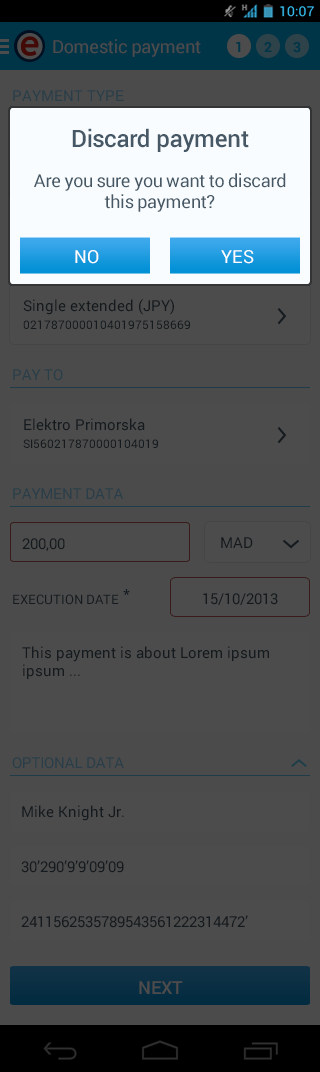
<style>
.page{position:relative;width:320px;height:1072px;background:#4c4c4c}
.page>*{position:absolute;margin:0}
.t1{font:18px "Roboto-Regular";letter-spacing:-0.015em;color:#4c4c4c}
.t2{font:15px "Roboto-Regular";color:#293e48}
.t3{font:18px/21.6px "Roboto-Regular";letter-spacing:-0.015em;color:#465866}
.t4{font:24px/28.8px "Roboto-Medium";letter-spacing:-0.015em;color:#465866}
.t5{font:18px "Roboto-Regular";color:#ffffff}
.t6{font:12px/18px "Roboto-Regular";color:#151a1e}
.t7{font:15px/18px "Roboto-Regular";color:#151a1e}
.t8{font:15px "Roboto-Regular";letter-spacing:-0.015em;color:#293e48}
.t9{font:12px/14.4px "Roboto-Regular";color:#151a1e}
.t10{font:15px "Roboto-Regular";color:#151a1e}
.t11{font:13px "OpenSans-Semibold";letter-spacing:-0.02em;color:#151a1e}
.t12{font:13px "Roboto-Regular";color:#151a1e}
.t13{font:18px "Roboto-Medium";color:#4c4c4c}
</style>
<div class="page">
<p class="t1" style="left:53px;top:39px;width:148px;height:18px">Domestic payment</p>
<p class="t2" style="left:13px;top:90px;width:111px;height:11px">PAYMENT TYPE</p>
<p class="t3" style="left:34px;top:128px;width:252px;height:84px;text-align:center"><span class="t4">Discard payment <br><br></span>Are you sure you want to discard <br>this payment?</p>
<p class="t5" style="left:75px;top:250px;width:24px;height:14px">NO</p>
<p class="t5" style="left:221px;top:250px;width:33px;height:14px">YES</p>
<p class="t6" style="left:23px;top:299px;width:167px;height:30px"><span class="t7">Single extended (JPY)<br></span>021787000010401975158669</p>
<p class="t8" style="left:13px;top:369px;width:50px;height:12px">PAY TO</p>
<p class="t7" style="left:23px;top:418px;width:135px;height:30px">Elektro Primorska<br><span class="t9">SI56</span><span class="t6">0217870000104019</span></p>
<p class="t8" style="left:13px;top:488px;width:110px;height:11px">PAYMENT DATA</p>
<p class="t10" style="left:22px;top:538px;width:43px;height:13px">200,00</p>
<p class="t10" style="left:221px;top:537px;width:32px;height:11px">MAD</p>
<p class="t11" style="left:123px;top:589px;width:7px;height:6px">*</p>
<p class="t10" style="left:203px;top:593px;width:75px;height:12px">15/10/2013</p>
<p class="t12" style="left:13px;top:594px;width:106px;height:11px">EXECUTION DATE</p>
<p class="t7" style="left:22px;top:646px;width:247px;height:33px">This payment is about Lorem ipsum ipsum ...</p>
<p class="t8" style="left:12px;top:757px;width:112px;height:12px">OPTIONAL DATA</p>
<p class="t10" style="left:22px;top:805px;width:102px;height:16px">Mike Knight Jr.</p>
<p class="t10" style="left:21px;top:860px;width:103px;height:13px">30’290’9’9’09’09</p>
<p class="t10" style="left:21px;top:915px;width:227px;height:13px">2411562535789543561222314472’</p>
<p class="t13" style="left:139px;top:981px;width:44px;height:13px">NEXT</p>
</div>
